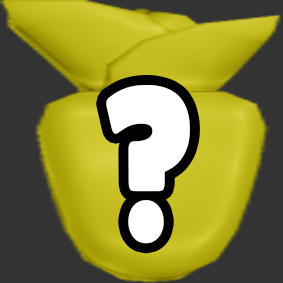
<style>
.page{position:relative;width:283px;height:283px;background:#333333}
.page>*{position:absolute;margin:0}
.t1{font:210.1px "CookieRunOTF-Black";color:#ffffff;scale:0.79 1}
</style>
<div class="page">
<p class="t1" style="left:106px;top:85px;width:84px;height:159px">?</p>
</div>
